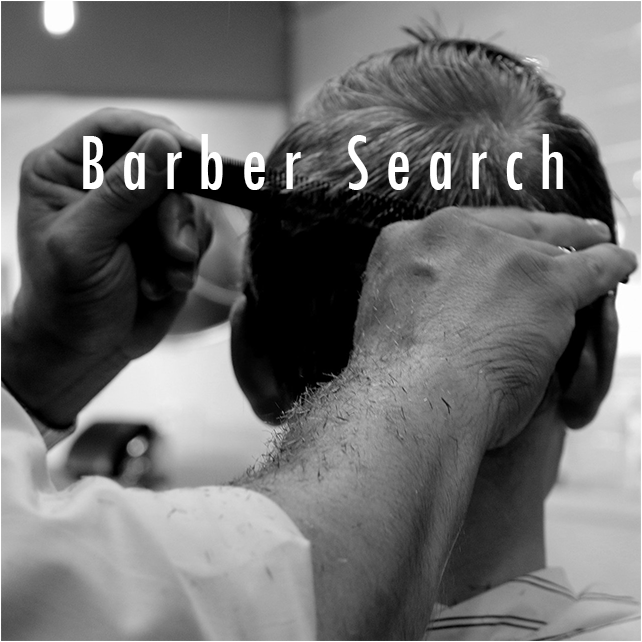
<style>
.page{position:relative;width:642px;height:642px}
.page>*{position:absolute;margin:0}
.t1{font:84.7px "TwCenMT-Condensed";color:#ffffff;scale:0.91 1}
</style>
<div class="page">
<p class="t1" style="left:83px;top:134px;width:480px;height:56px">B a r b e r   S e a r c h</p>
</div>
